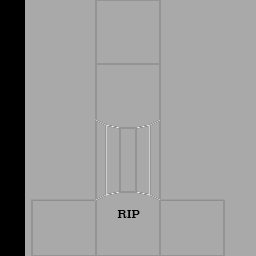
<style>
.page{position:relative;width:256px;height:256px;background:#a9a9a9}
.page>*{position:absolute;margin:0}
.t1{font:11px "Superclarendon-Regular";color:#000000}
</style>
<div class="page">
<p class="t1" style="left:117px;top:210px;width:23px;height:8px">RIP</p>
</div>
